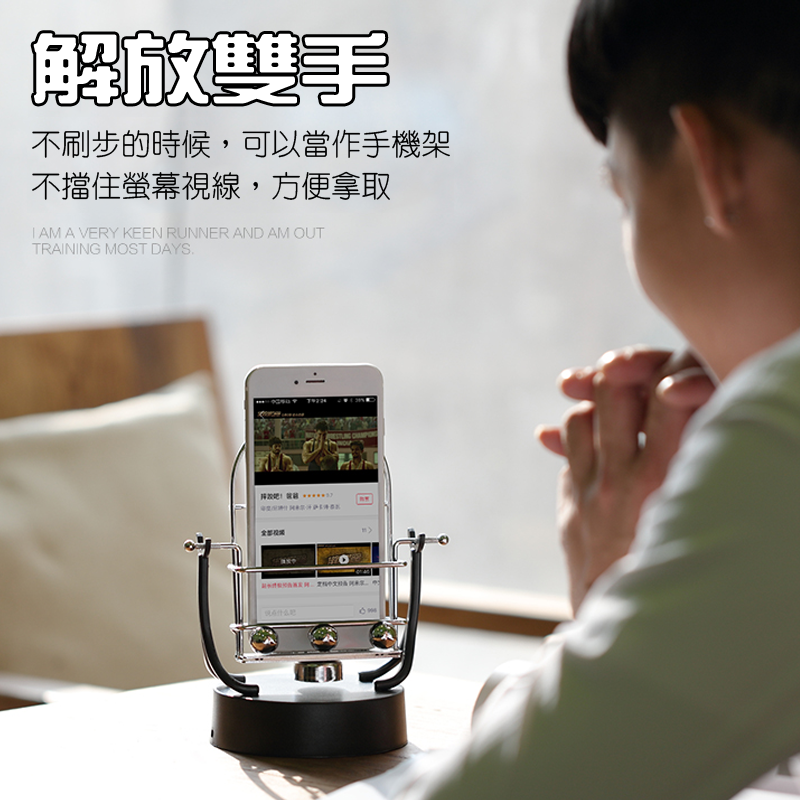
<style>
.page{position:relative;width:800px;height:800px}
.page>*{position:absolute;margin:0}
.t1{font:74.5px "HanWangZonYi";color:#ffffff;scale:1.2 1}
.t2{font:30px "HanWangYenLight";color:#000000}
</style>
<div class="page">
<p class="t1" style="left:33px;top:33px;width:354px;height:71px">解放雙手</p>
<p class="t2" style="left:32px;top:129px;width:418px;height:71px">不刷步的時候，可以當作手機架<br>不擋住螢幕視線，方便拿取</p>
</div>
